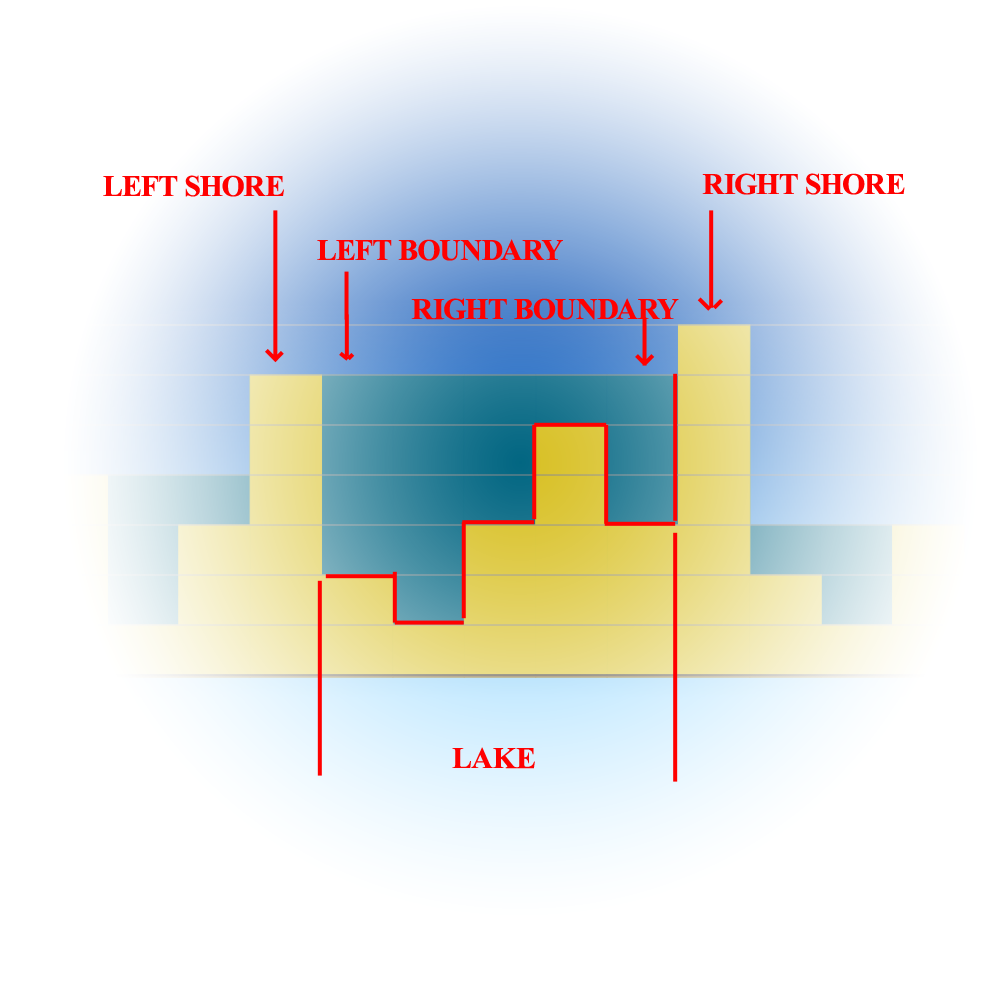
<style>
.page{position:relative;width:1000px;height:1000px;background:#ffffff}
.page>*{position:absolute;margin:0}
.t1{font:30px "TimesNewRomanPS-BoldMT";letter-spacing:-0.025em;color:#ff0000;text-transform:uppercase}
</style>
<div class="page">
<p class="t1" style="left:702px;top:173px;width:203px;height:22px">Right Shore</p>
<p class="t1" style="left:103px;top:175px;width:181px;height:22px">Left shore</p>
<p class="t1" style="left:317px;top:239px;width:246px;height:22px">Left boundary</p>
<p class="t1" style="left:411px;top:298px;width:268px;height:22px">Right Boundary</p>
<p class="t1" style="left:452px;top:747px;width:83px;height:22px">LAKE</p>
</div>
